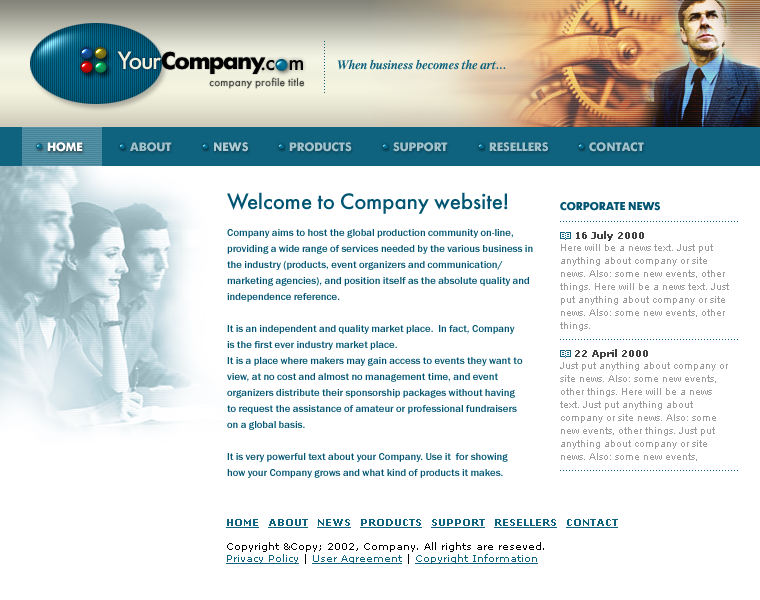
<style>
.page{position:relative;width:760px;height:600px;background:#ffffff}
.page>*{position:absolute;margin:0}
.t1{font:25px "FuturisC";letter-spacing:-0.05em;color:#f0f0dc}
.t2{font:24px "FuturisC-Bold";letter-spacing:-0.05em;color:#000000}
.t3{font:12px "PetersburgC-BoldItalic";letter-spacing:-0.02em;color:#0f637f}
.t4{font:11px "FuturisC";letter-spacing:0.01em;color:#484842}
.t5{font:12px "FuturisC-Bold";color:#ffffff}
.t6{font:12px "FuturisC-Bold";color:#9fc1cc}
.t7{font:12px "FuturisC-Bold";color:#adcad3}
.t8{font:22px "FuturisC";color:#005572}
.t9{font:11px "FuturisC-Bold";color:#005572}
.t10{font:10px/16px "FranklinGothicMediumC";color:#005572}
</style>
<div class="page">
<p class="t1" style="left:117px;top:51px;width:44px;height:19px">Your</p>
<p class="t2" style="left:161px;top:51px;width:105px;height:23px">Company</p>
<p class="t3" style="left:337px;top:59px;width:169px;height:11px">When business becomes the art...</p>
<p class="t4" style="left:209px;top:77px;width:95px;height:12px">company profile title</p>
<p class="t5" style="left:47px;top:142px;width:36px;height:10px">HOME</p>
<p class="t6" style="left:130px;top:142px;width:42px;height:10px">ABOUT</p>
<p class="t7" style="left:214px;top:142px;width:34px;height:10px">NEWS</p>
<p class="t6" style="left:289px;top:142px;width:63px;height:10px">PRODUCTS</p>
<p class="t6" style="left:393px;top:142px;width:55px;height:10px">SUPPORT</p>
<p class="t6" style="left:489px;top:142px;width:59px;height:10px">RESELLERS</p>
<p class="t6" style="left:589px;top:142px;width:55px;height:10px">CONTACT</p>
<p class="t8" style="left:227px;top:192px;width:281px;height:22px">Welcome to Company website!</p>
<p class="t9" style="left:560px;top:202px;width:100px;height:9px">CORPORATE NEWS</p>
<p class="t10" style="left:227px;top:229px;width:306px;height:249px">Company aims to host the global production community on-line, <br>providing a wide range of services needed by the various business in <br>the industry (products, event organizers and communication/<br>marketing agencies), and position itself as the absolute quality and <br>independence reference.<br><br>It is an independent and quality market place.  In fact, Company <br>is the first ever industry market place.   <br>It is a place where makers may gain access to events they want to <br>view, at no cost and almost no management time, and event <br>organizers distribute their sponsorship packages without having <br>to request the assistance of amateur or professional fundraisers <br>on a global basis.<br><br>It is very powerful text about your Company. Use it  for showing <br>how your Company grows and what kind of products it makes.</p>
</div>
